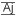
<style>
.page{position:relative;width:16px;height:16px;background:#ffffff}
.page>*{position:absolute;margin:0}
.t1{font:12px "ArialMT";color:#252525}
</style>
<div class="page">
<p class="t1" style="left:3px;top:2px;width:10px;height:12px">Aj</p>
</div>
